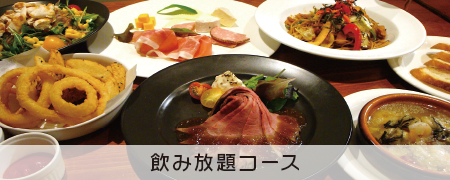
<style>
.page{position:relative;width:450px;height:180px}
.page>*{position:absolute;margin:0}
.t1{font:19.8px "OT-NIS_WKL4";letter-spacing:0.1em;color:#231815}
</style>
<div class="page">
<p class="t1" style="left:150px;top:153px;width:149px;height:19px">飲み放題コース</p>
</div>
